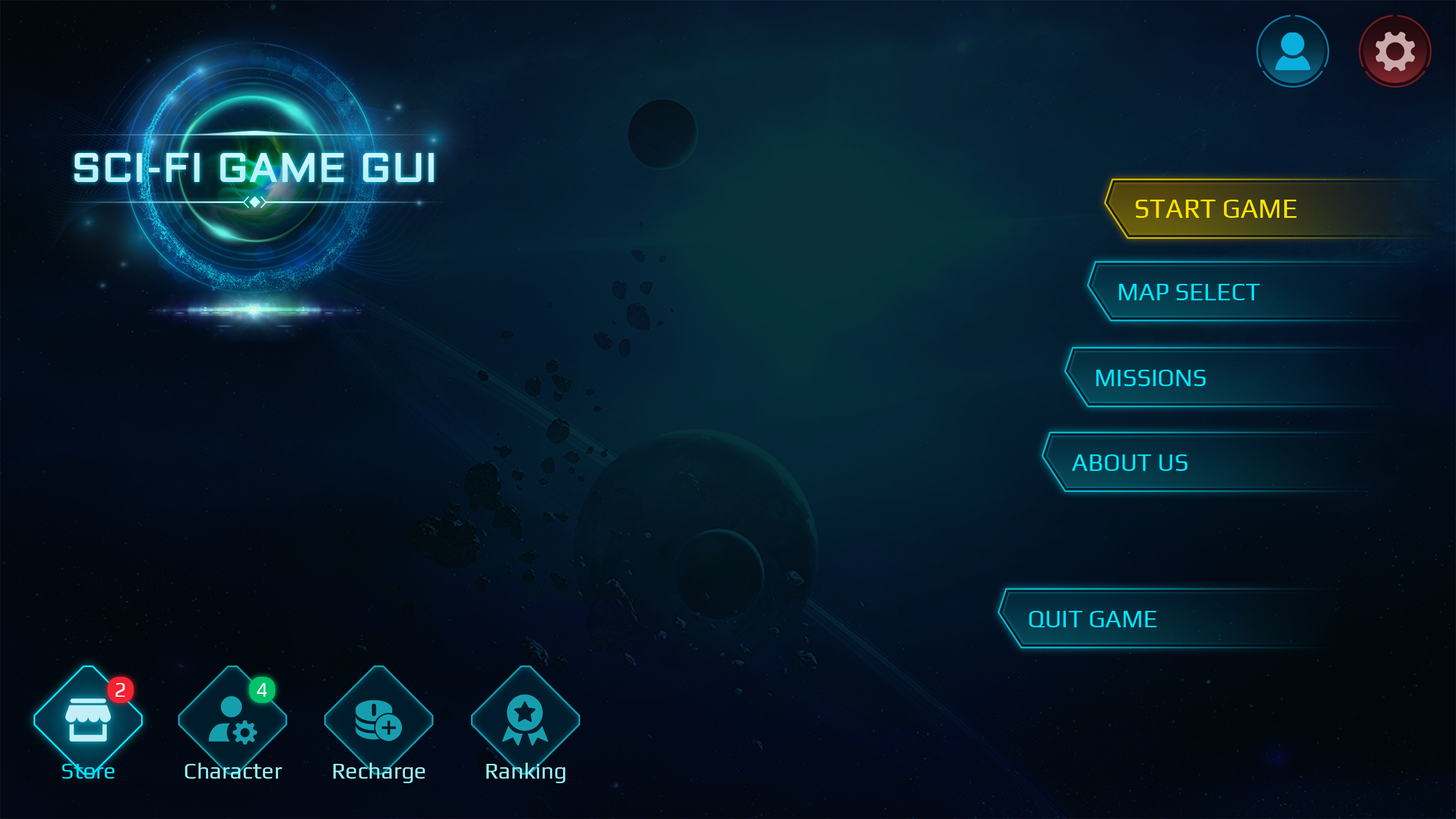
<style>
.page{position:relative;width:1456px;height:819px}
.page>*{position:absolute;margin:0}
.t1{font:40.9px "Aldrich";color:#c1f3fb;font-weight:bold}
.t2{font:27.3px "Play-Regular";color:#ffe400}
.t3{font:25px "Play-Regular";color:#00e4ff}
.t4{font:20.5px "Play-Regular";color:#ffffff}
.t5{font:22.7px "Play-Regular";color:#00e4ff}
.t6{font:22.7px "Play-Regular";color:#99f1f7}
</style>
<div class="page">
<p class="t1" style="left:74px;top:153px;width:360px;height:29px">SCI-FI GAME GUI</p>
<p class="t2" style="left:1135px;top:200px;width:162px;height:18px">START GAME</p>
<p class="t3" style="left:1119px;top:284px;width:141px;height:16px">MAP SELECT</p>
<p class="t3" style="left:1096px;top:370px;width:110px;height:16px">MISSIONS</p>
<p class="t3" style="left:1072px;top:454px;width:116px;height:17px">ABOUT US</p>
<p class="t3" style="left:1029px;top:611px;width:128px;height:16px">QUIT GAME</p>
<p class="t4" style="left:115px;top:683px;width:10px;height:14px">2</p>
<p class="t4" style="left:257px;top:683px;width:10px;height:14px">4</p>
<p class="t5" style="left:62px;top:764px;width:52px;height:15px">Store</p>
<p class="t6" style="left:185px;top:763px;width:97px;height:16px">Character</p>
<p class="t6" style="left:333px;top:763px;width:92px;height:20px">Recharge</p>
<p class="t6" style="left:486px;top:763px;width:79px;height:20px">Ranking</p>
</div>
